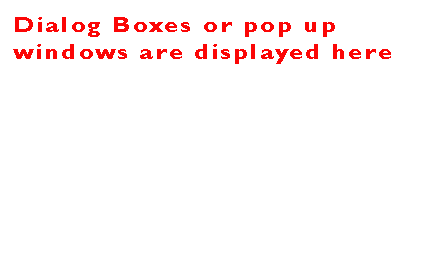
<style>
.page{position:relative;width:442px;height:267px;background:#ffffff}
.page>*{position:absolute;margin:0}
.t1{font:21px/26.8px "GillSansMT-Bold";letter-spacing:0.08em;color:#fb0606;scale:1.26 1}
</style>
<div class="page">
<p class="t1" style="left:13px;top:17px;width:378px;height:47px">Dialog Boxes or pop up <br>windows are displayed here</p>
</div>
